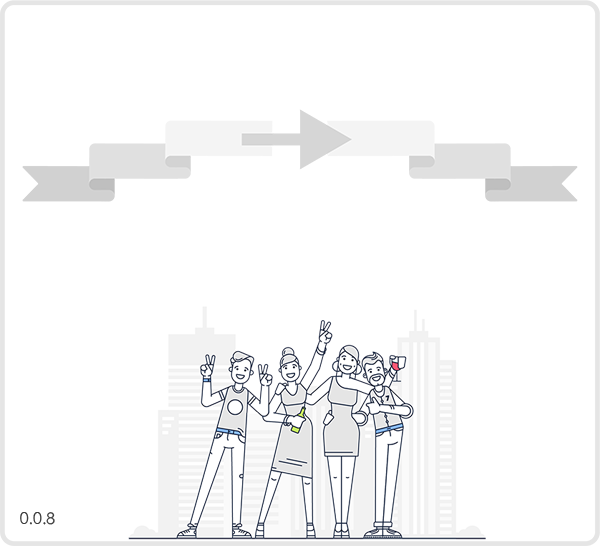
<style>
.page{position:relative;width:600px;height:546px;background:#ffffff}
.page>*{position:absolute;margin:0}
.t1{font:16px "STHeitiTC-Light";color:#3d3d3d}
</style>
<div class="page">
<p class="t1" style="left:20px;top:512px;width:35px;height:13px">0.0.8</p>
</div>
